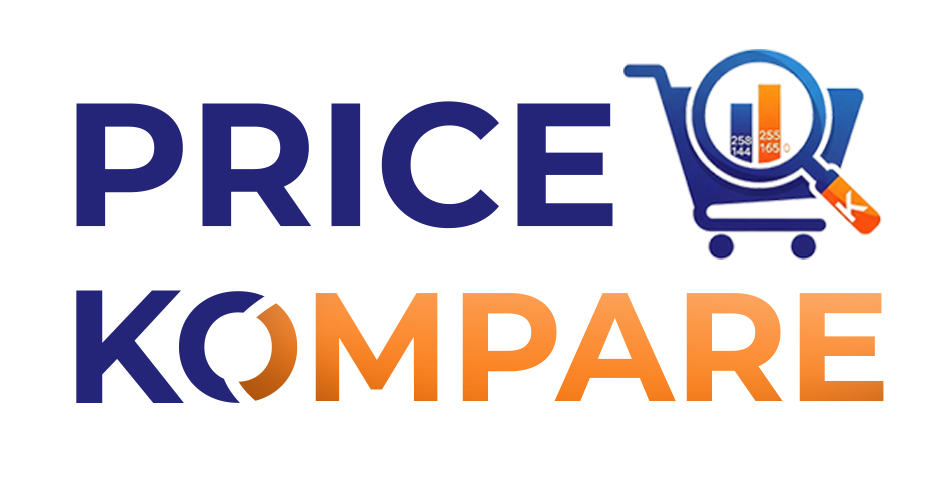
<style>
.page{position:relative;width:950px;height:500px;background:#ffffff}
.page>*{position:absolute;margin:0}
.t1{font:175px/175px "MontserratRoman-Bold"}
.t2{font:154.2px/175px "MontserratRoman-Bold"}
.t3{font:160.7px "MontserratRoman-Bold";color:#242579}
</style>
<div class="page">
<p class="t1" style="left:68px;top:101px;width:816px;height:302px">PRICE<br><span class="t2">CO</span><span class="t2">MPARE</span></p>
<p class="t3" style="left:76px;top:290px;width:108px;height:113px">K</p>
</div>
